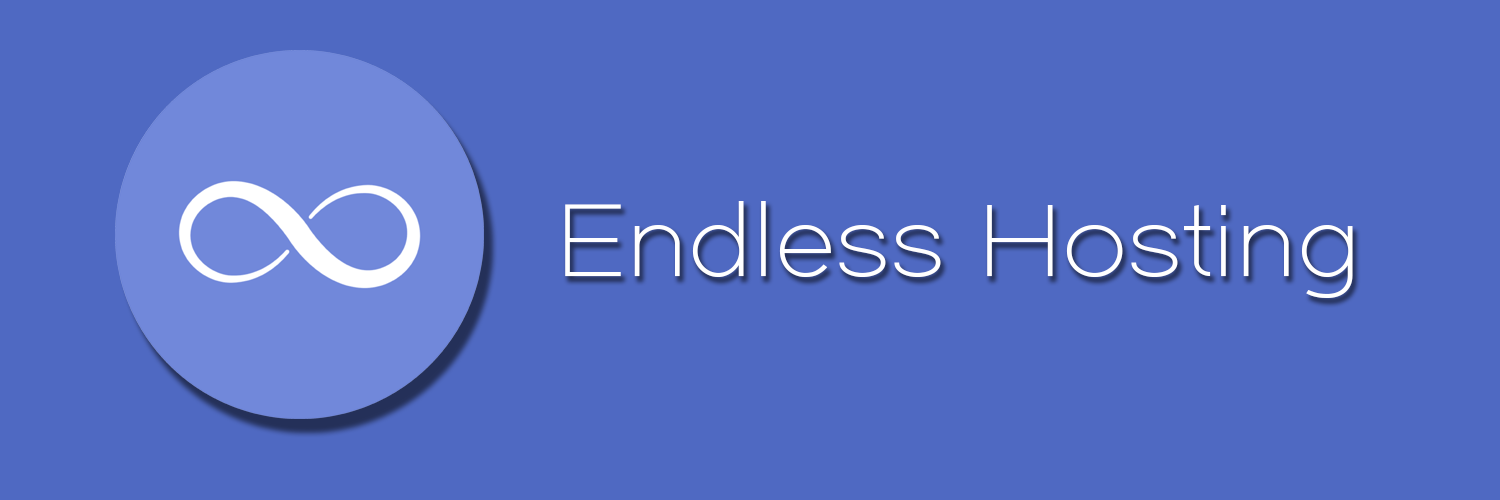
<style>
.page{position:relative;width:1500px;height:500px;background:#4f69c2}
.page>*{position:absolute;margin:0}
.t1{font:100px "Dual-300";color:#ffffff;scale:1.13 1}
</style>
<div class="page">
<p class="t1" style="left:565px;top:201px;width:788px;height:97px">Endless Hosting</p>
</div>
